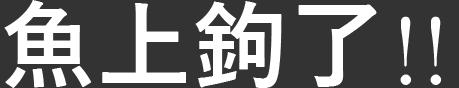
<style>
.page{position:relative;width:459px;height:88px;background:#333333}
.page>*{position:absolute;margin:0}
.t1{font:95.8px "YuGothicUI-Semibold";color:#ffffff}
.t2{font:95.8px "HanWangMingMedium";color:#ffffff}
</style>
<div class="page">
<p class="t1" style="left:4px;top:0px;width:438px;height:88px">魚上鉤了<span class="t2">!!</span></p>
</div>
